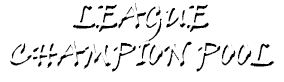
<style>
.page{position:relative;width:284px;height:82px;background:#ffffff}
.page>*{position:absolute;margin:0}
.t1{font:32.1px "VinerHandITC"}
</style>
<div class="page">
<p class="t1" style="left:10px;top:3px;width:264px;height:69px;text-align:center">LEAGUE<br>CHAMPION POOL</p>
</div>
